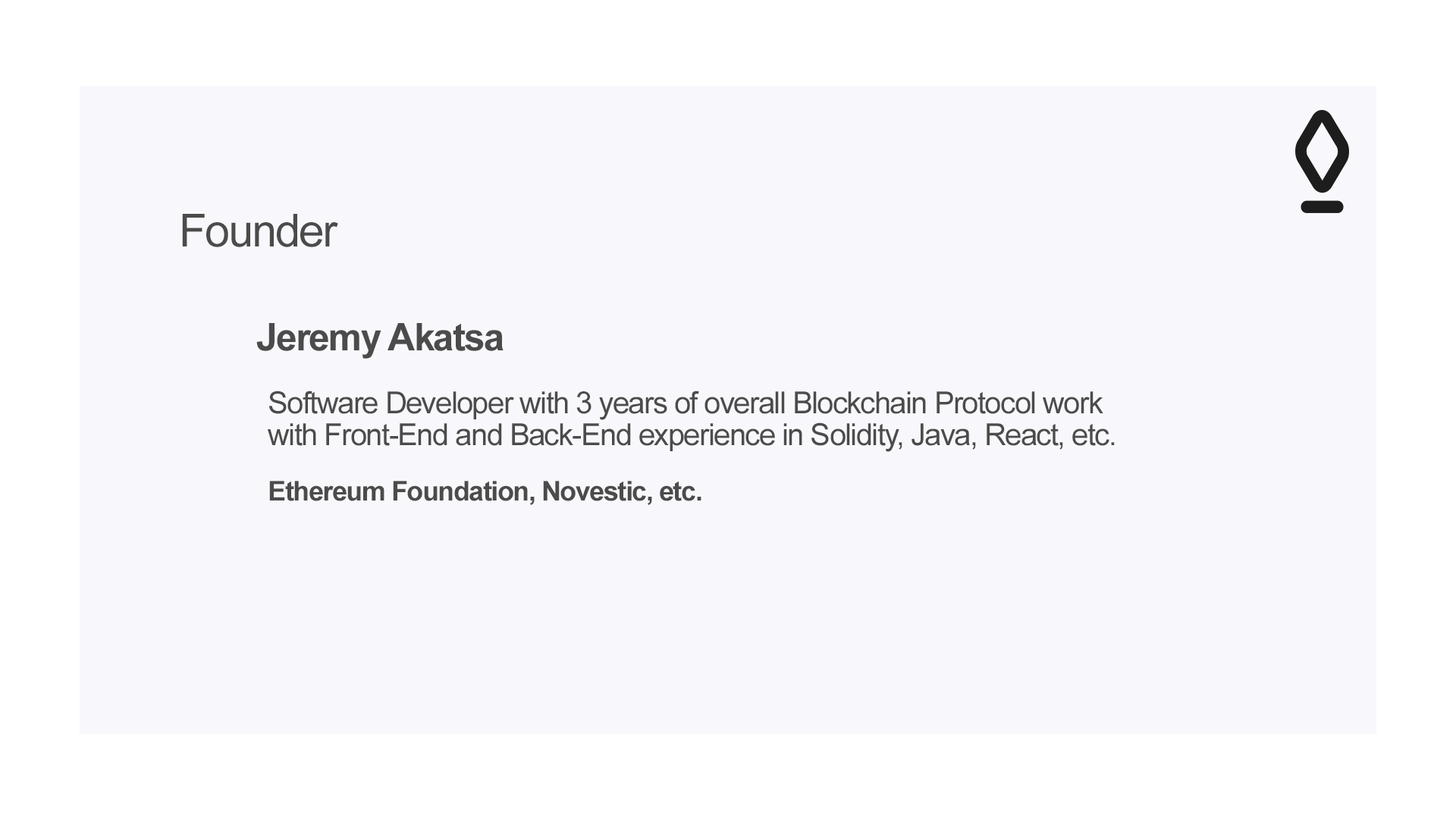
<style>
.page{position:relative;width:1456px;height:819px;background:#f8f8fc}
.page>*{position:absolute;margin:0}
.t1{font:45.5px "ArialMT";letter-spacing:-0.04em;color:#4b4b4b}
.t2{font:38.1px "Arial-BoldMT";letter-spacing:-0.04em;color:#4b4b4b}
.t3{font:30.3px/31.8px "ArialMT";letter-spacing:-0.04em;color:#4b4b4b}
.t4{font:27.3px "Arial-BoldMT";letter-spacing:-0.04em;color:#4b4b4b}
</style>
<div class="page">
<p class="t1" style="left:182px;top:214px;width:156px;height:33px">Founder</p>
<p class="t2" style="left:256px;top:323px;width:248px;height:36px">Jeremy Akatsa</p>
<p class="t3" style="left:268px;top:391px;width:847px;height:61px">Software Developer with 3 years of overall Blockchain Protocol work <br>with Front-End and Back-End experience in Solidity, Java, React, etc.</p>
<p class="t4" style="left:269px;top:481px;width:432px;height:24px">Ethereum Foundation, Novestic, etc.</p>
</div>
